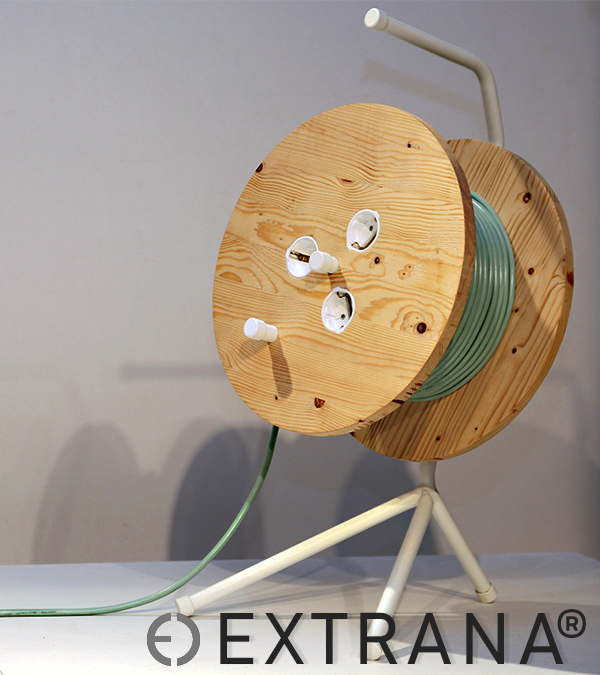
<style>
.page{position:relative;width:600px;height:675px}
.page>*{position:absolute;margin:0}
.t1{font:72px "Bahnschrift_372wght";letter-spacing:0.1em;color:#242424}
.t2{font:48px "Bahnschrift_372wght";letter-spacing:0.1em;color:#242424}
</style>
<div class="page">
<p class="t1" style="left:220px;top:612px;width:344px;height:52px">EXTRANA</p>
<p class="t2" style="left:557px;top:609px;width:29px;height:29px">®</p>
</div>
